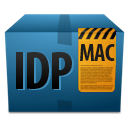
<style>
.page{position:relative;width:128px;height:128px;background:#ffffff}
.page>*{position:absolute;margin:0}
.t1{font:53.8px "MyriadPro-BoldCond";color:#191919}
.t2{font:24.6px "MyriadPro-BoldCond";letter-spacing:-0.02em;color:#1b1b1b}
</style>
<div class="page">
<p class="t1" style="left:16px;top:52px;width:56px;height:37px">IDP</p>
<p class="t2" style="left:80px;top:44px;width:35px;height:17px">MAC</p>
</div>
